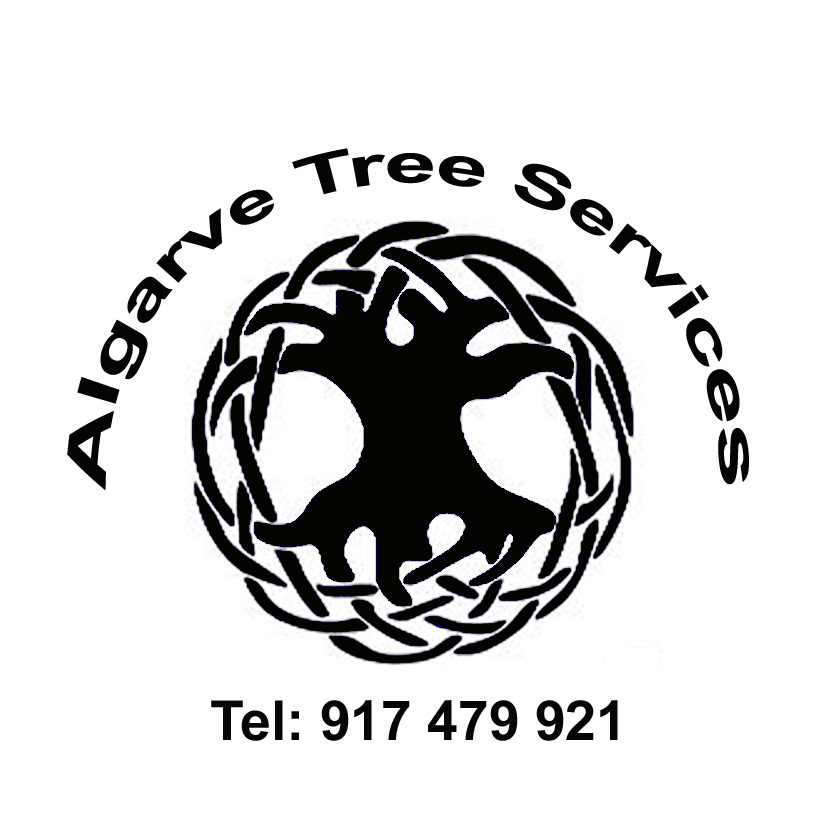
<style>
.page{position:relative;width:827px;height:827px;background:#ffffff}
.page>*{position:absolute;margin:0}
.t1{font:55.2px "Arial-BoldMT";color:#040404}
.t2{font:55.2px "Arial-BoldMT";color:#050505}
</style>
<div class="page">
<p class="t1" style="left:67px;top:148px;width:682px;height:343px;text-align:center">Algarve Tree Services</p>
<p class="t2" style="left:211px;top:700px;width:407px;height:41px">Tel: 917 479 921</p>
</div>
